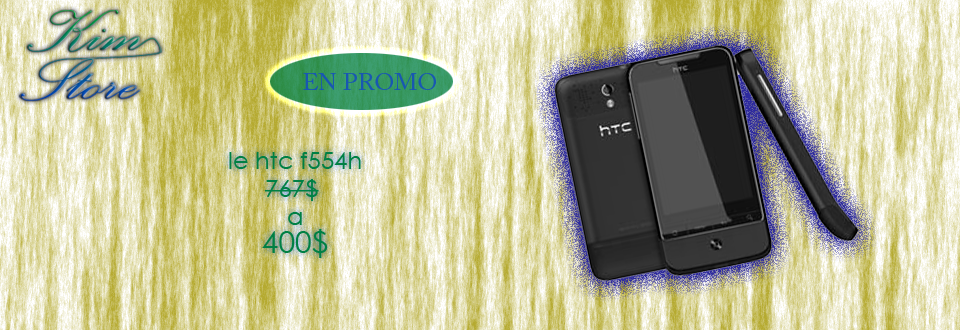
<style>
.page{position:relative;width:960px;height:330px}
.page>*{position:absolute;margin:0}
.t1{font:24px "ACaslonPro-Regular";color:#1857b2;text-transform:uppercase}
.t2{font:24px/28px "CenturyGothic";color:#008044}
.t3{font:30px/28px "CenturyGothic";color:#008044}
</style>
<div class="page">
<p class="t1" style="left:303px;top:73px;width:133px;height:17px">En promo</p>
<p class="t2" style="left:229px;top:152px;width:132px;height:106px;text-align:center">le htc f554h<br>767$ <br>a<br><span class="t3">400$</span></p>
</div>
